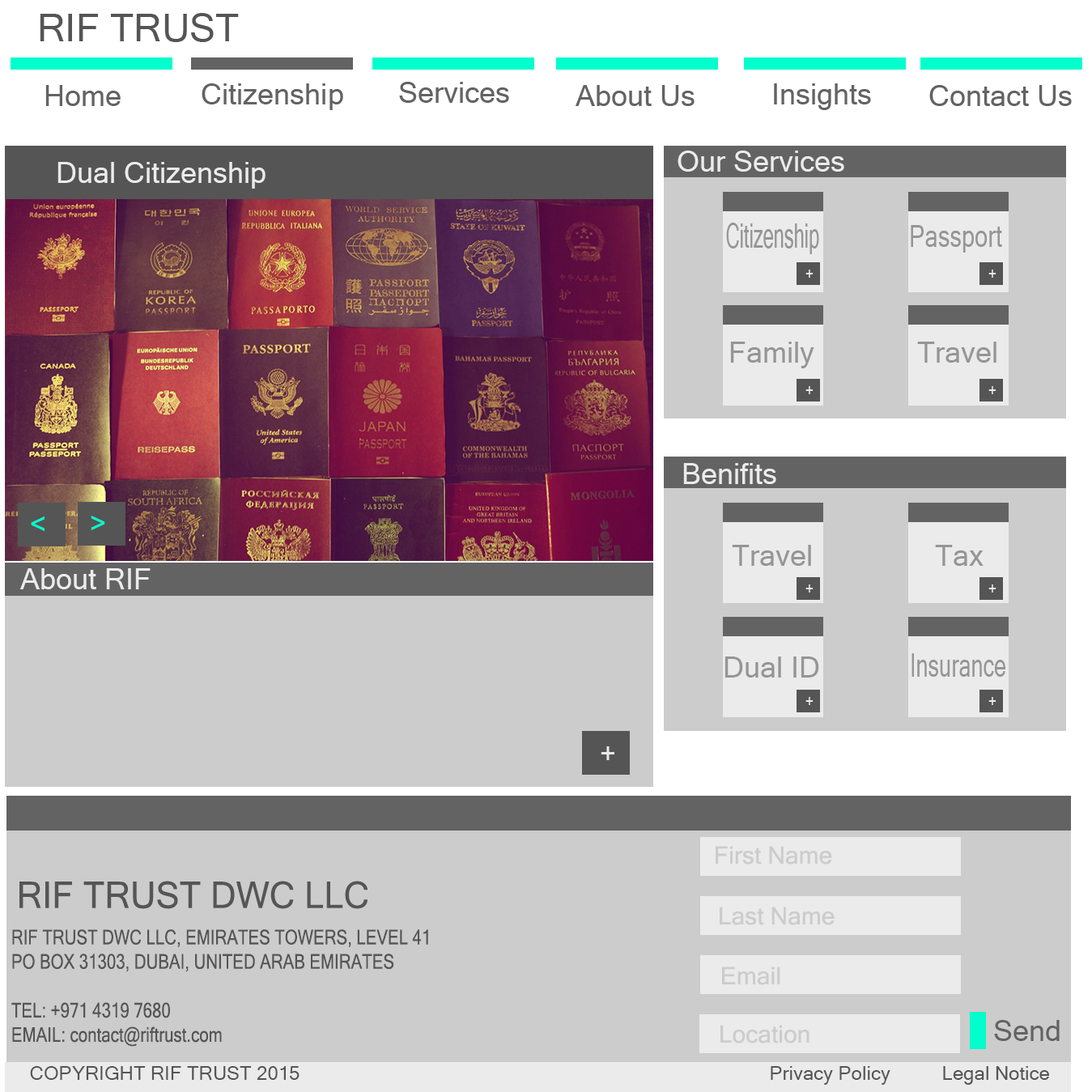
<style>
.page{position:relative;width:1092px;height:1092px;background:#cccccc}
.page>*{position:absolute;margin:0}
.t1{font:38.9px "MicrosoftSansSerif";color:#555555}
.t2{font:29.1px "MicrosoftSansSerif";color:#636363}
.t3{font:29.1px "MicrosoftSansSerif";color:#ebebeb}
.t4{font:33.7px "MicrosoftSansSerif";color:#959595;scale:0.56 1}
.t5{font:30.1px "MicrosoftSansSerif";color:#959595;scale:0.79 1}
.t6{font:15.5px "MicrosoftSansSerif";color:#ebebeb;scale:0.87 1}
.t7{font:29.1px "MicrosoftSansSerif";color:#959595}
.t8{font:29.8px "MicrosoftSansSerif";color:#00ffcc;scale:0.92 1}
.t9{font:32.3px "MicrosoftSansSerif";color:#959595;scale:0.68 1}
.t10{font:29.8px "MicrosoftSansSerif";color:#ebebeb;scale:0.92 1}
.t11{font:24.3px "MicrosoftSansSerif";color:#cccccc}
.t12{font:36.7px "MicrosoftSansSerif";color:#555555;scale:0.96 1}
.t13{font:20.3px "MicrosoftSansSerif";color:#555555;scale:0.82 1}
.t14{font:19.4px "MicrosoftSansSerif";color:#555555}
</style>
<div class="page">
<p class="t1" style="left:40px;top:13px;width:199px;height:29px">RIF TRUST</p>
<p class="t2" style="left:45px;top:85px;width:76px;height:21px">Home</p>
<p class="t2" style="left:202px;top:83px;width:141px;height:27px">Citizenship</p>
<p class="t2" style="left:399px;top:82px;width:110px;height:21px">Services</p>
<p class="t2" style="left:575px;top:85px;width:120px;height:21px">About Us</p>
<p class="t2" style="left:774px;top:83px;width:97px;height:27px">Insights</p>
<p class="t2" style="left:929px;top:85px;width:143px;height:21px">Contact Us</p>
<p class="t3" style="left:57px;top:162px;width:209px;height:27px">Dual Citizenship</p>
<p class="t3" style="left:678px;top:151px;width:166px;height:21px">Our Services</p>
<p class="t4" style="left:726px;top:223px;width:93px;height:31px">Citizenship</p>
<p class="t5" style="left:911px;top:225px;width:91px;height:28px">Passport</p>
<p class="t6" style="left:805px;top:270px;width:9px;height:8px">+</p>
<p class="t6" style="left:988px;top:270px;width:8px;height:8px">+</p>
<p class="t7" style="left:730px;top:342px;width:84px;height:26px">Family</p>
<p class="t7" style="left:917px;top:342px;width:79px;height:21px">Travel</p>
<p class="t6" style="left:805px;top:386px;width:9px;height:8px">+</p>
<p class="t6" style="left:988px;top:386px;width:8px;height:8px">+</p>
<p class="t3" style="left:683px;top:463px;width:93px;height:21px">Benifits</p>
<p class="t8" style="left:31px;top:516px;width:14px;height:15px">&lt;</p>
<p class="t8" style="left:91px;top:516px;width:14px;height:14px">&gt;</p>
<p class="t7" style="left:732px;top:545px;width:79px;height:21px">Travel</p>
<p class="t7" style="left:935px;top:545px;width:49px;height:21px">Tax</p>
<p class="t3" style="left:19px;top:568px;width:132px;height:21px">About RIF</p>
<p class="t6" style="left:805px;top:584px;width:9px;height:9px">+</p>
<p class="t6" style="left:988px;top:584px;width:8px;height:9px">+</p>
<p class="t9" style="left:911px;top:653px;width:94px;height:24px">Insurance</p>
<p class="t7" style="left:724px;top:656px;width:95px;height:22px">Dual ID</p>
<p class="t6" style="left:805px;top:697px;width:9px;height:8px">+</p>
<p class="t6" style="left:988px;top:697px;width:8px;height:8px">+</p>
<p class="t10" style="left:601px;top:746px;width:13px;height:14px">+</p>
<p class="t11" style="left:716px;top:846px;width:116px;height:19px">First Name</p>
<p class="t12" style="left:19px;top:881px;width:349px;height:28px">RIF TRUST DWC LLC</p>
<p class="t11" style="left:720px;top:907px;width:115px;height:18px">Last Name</p>
<p class="t13" style="left:11px;top:929px;width:417px;height:118px">RIF TRUST DWC LLC, EMIRATES TOWERS, LEVEL 41<br>PO BOX 31303, DUBAI, UNITED ARAB EMIRATES<br> <br>TEL: +971 4319 7680<br>EMAIL: contact@riftrust.com</p>
<p class="t11" style="left:722px;top:967px;width:58px;height:18px">Email</p>
<p class="t11" style="left:720px;top:1025px;width:89px;height:18px">Location</p>
<p class="t2" style="left:994px;top:1020px;width:66px;height:21px">Send</p>
<p class="t14" style="left:30px;top:1066px;width:270px;height:14px">COPYRIGHT RIF TRUST 2015</p>
<p class="t14" style="left:771px;top:1066px;width:278px;height:19px">Privacy Policy          Legal Notice</p>
</div>
